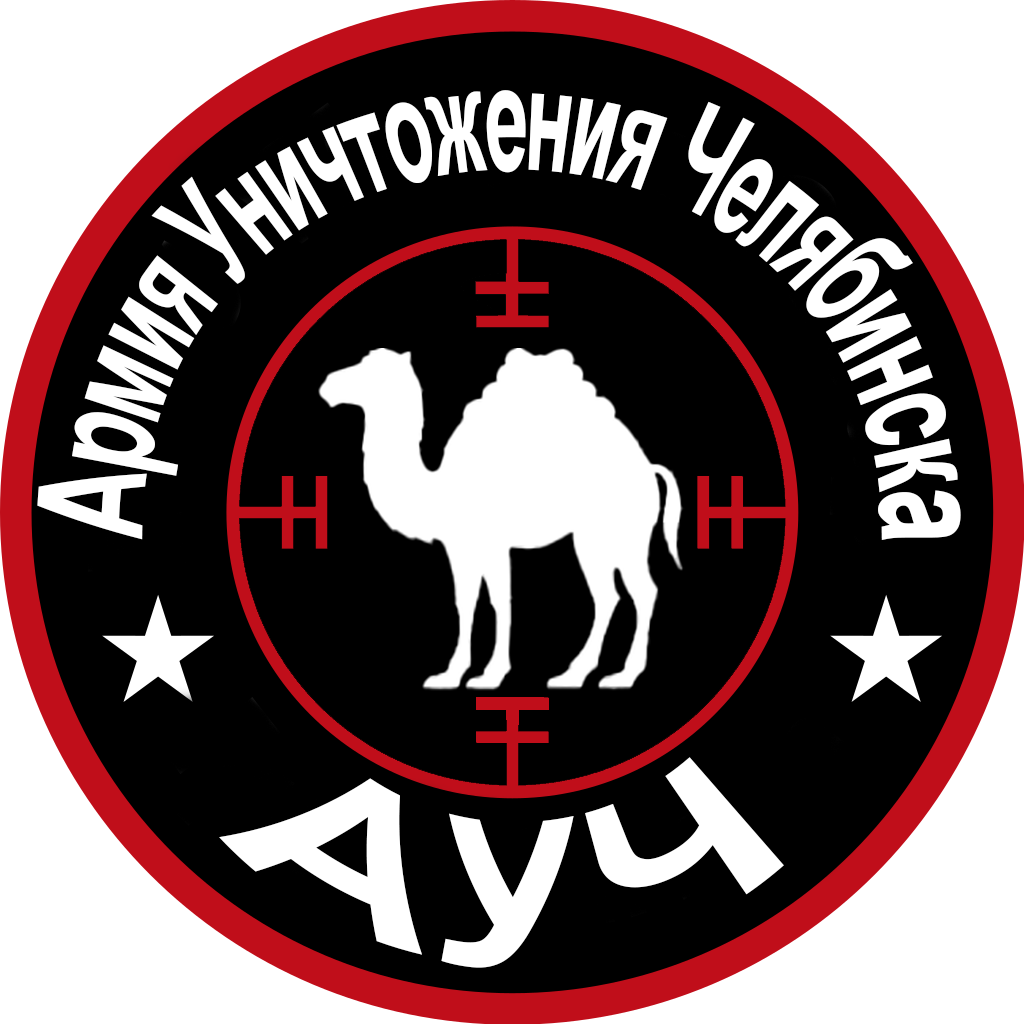
<style>
.page{position:relative;width:1024px;height:1024px;background:#000000}
.page>*{position:absolute;margin:0}
.t1{font:55.9px "ArialNarrow-Bold";letter-spacing:-0.02em;color:#ffffff;scale:1.04 1}
.t2{font:199px "ArialNarrow-Bold";letter-spacing:-0.02em;color:#ffffff;scale:1.04 1}
</style>
<div class="page">
<p class="t1" style="left:37px;top:90px;width:924px;height:450px">Армия Уничтожения Челябинска</p>
<p class="t2" style="left:219px;top:757px;width:565px;height:211px;rotate:2deg">АУЧ</p>
</div>
